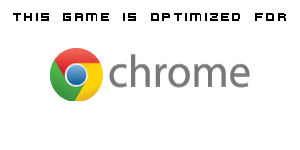
<style>
.page{position:relative;width:300px;height:150px;background:#ffffff}
.page>*{position:absolute;margin:0}
.t1{font:13px "VirtualDJ";color:#000000}
</style>
<div class="page">
<p class="t1" style="left:13px;top:13px;width:273px;height:8px">This game is optimized for</p>
</div>
